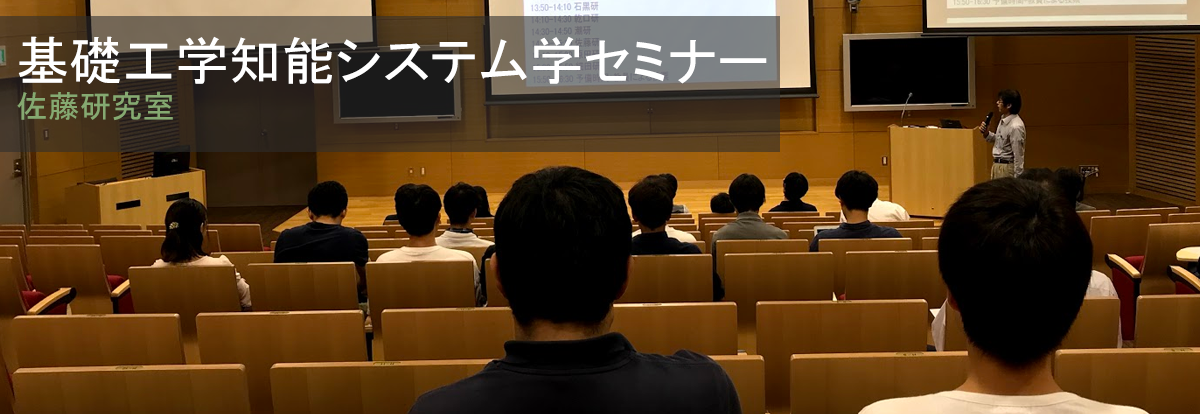
<style>
.page{position:relative;width:1200px;height:414px}
.page>*{position:absolute;margin:0}
.t1{font:52.5px "MS-PGothic";letter-spacing:0.01em;color:#ffffff}
.t2{font:31.3px "MS-PGothic";letter-spacing:0.01em;color:#85a971}
</style>
<div class="page">
<p class="t1" style="left:17px;top:36px;width:750px;height:85px">基礎工学知能システム学セミナー<br><span class="t2">佐藤研究室</span></p>
</div>
